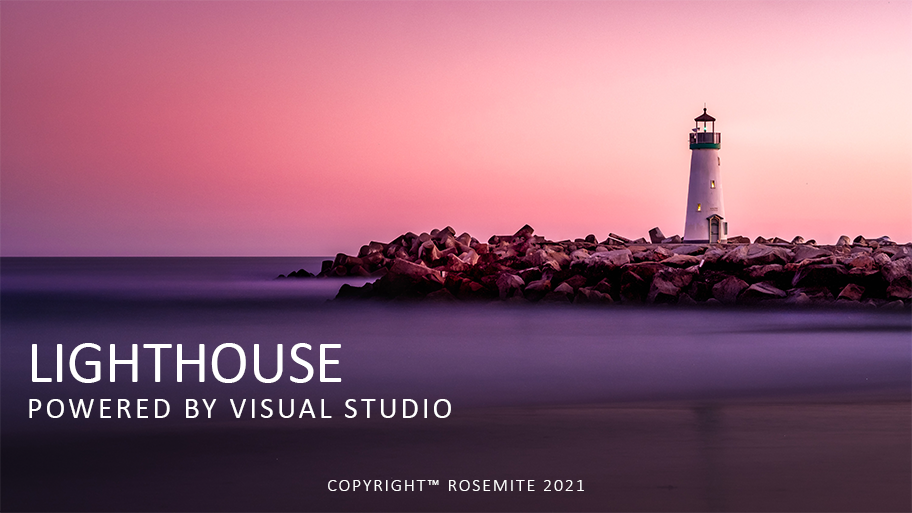
<style>
.page{position:relative;width:912px;height:513px}
.page>*{position:absolute;margin:0}
.t1{font:30px "Calibri";letter-spacing:0.1em;color:#ffffff}
.t2{font:60px "Calibri";color:#ffffff}
.t3{font:18px "Calibri-Light";letter-spacing:0.1em;color:#ffffff}
</style>
<div class="page">
<p class="t1" style="left:29px;top:343px;width:422px;height:75px"><span class="t2">LIGHTHOUSE<br></span>POWERED BY VISUAL STUDIO</p>
<p class="t3" style="left:328px;top:480px;width:256px;height:11px">COPYRIGHT™ ROSEMITE 2021</p>
</div>
